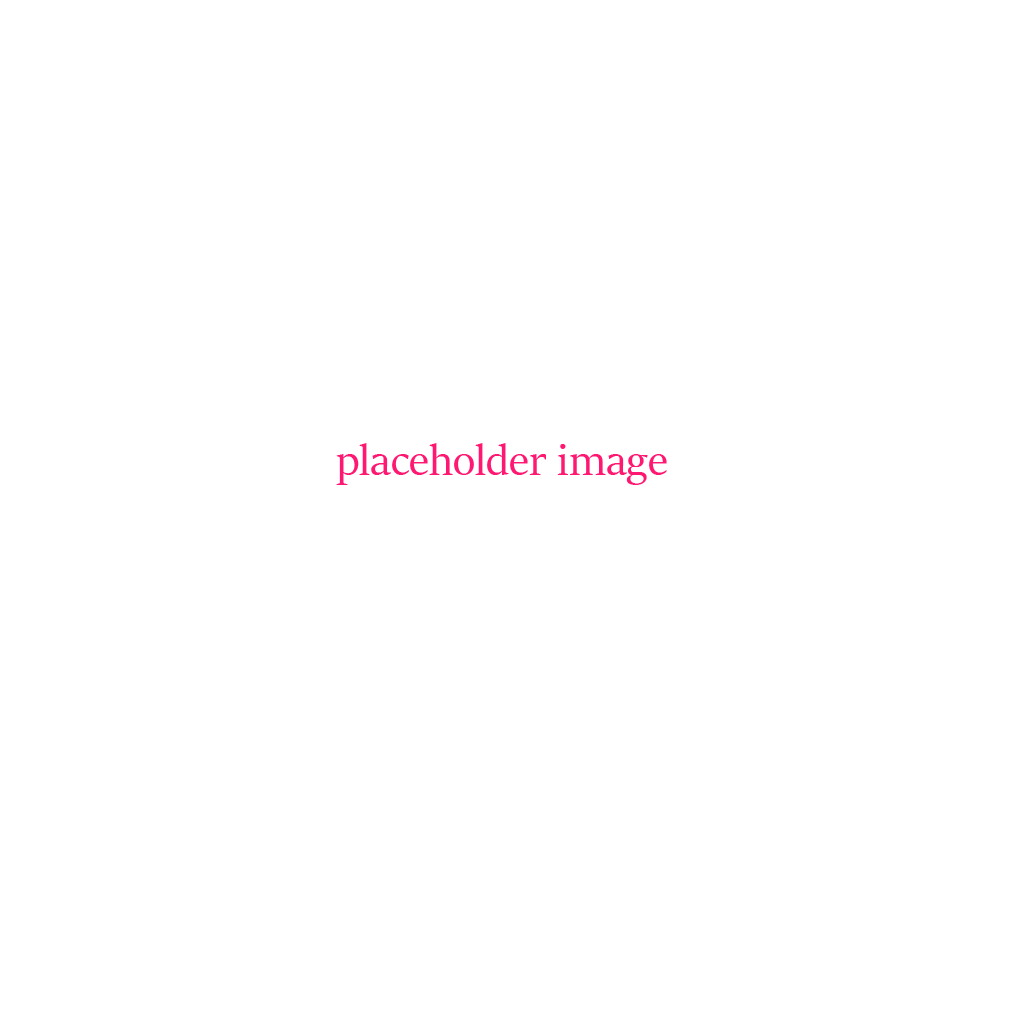
<style>
.page{position:relative;width:1024px;height:1024px;background:#ffffff}
.page>*{position:absolute;margin:0}
.t1{font:48px "SitkaBanner";color:#ff1872}
</style>
<div class="page">
<p class="t1" style="left:336px;top:443px;width:331px;height:42px">placeholder image</p>
</div>
